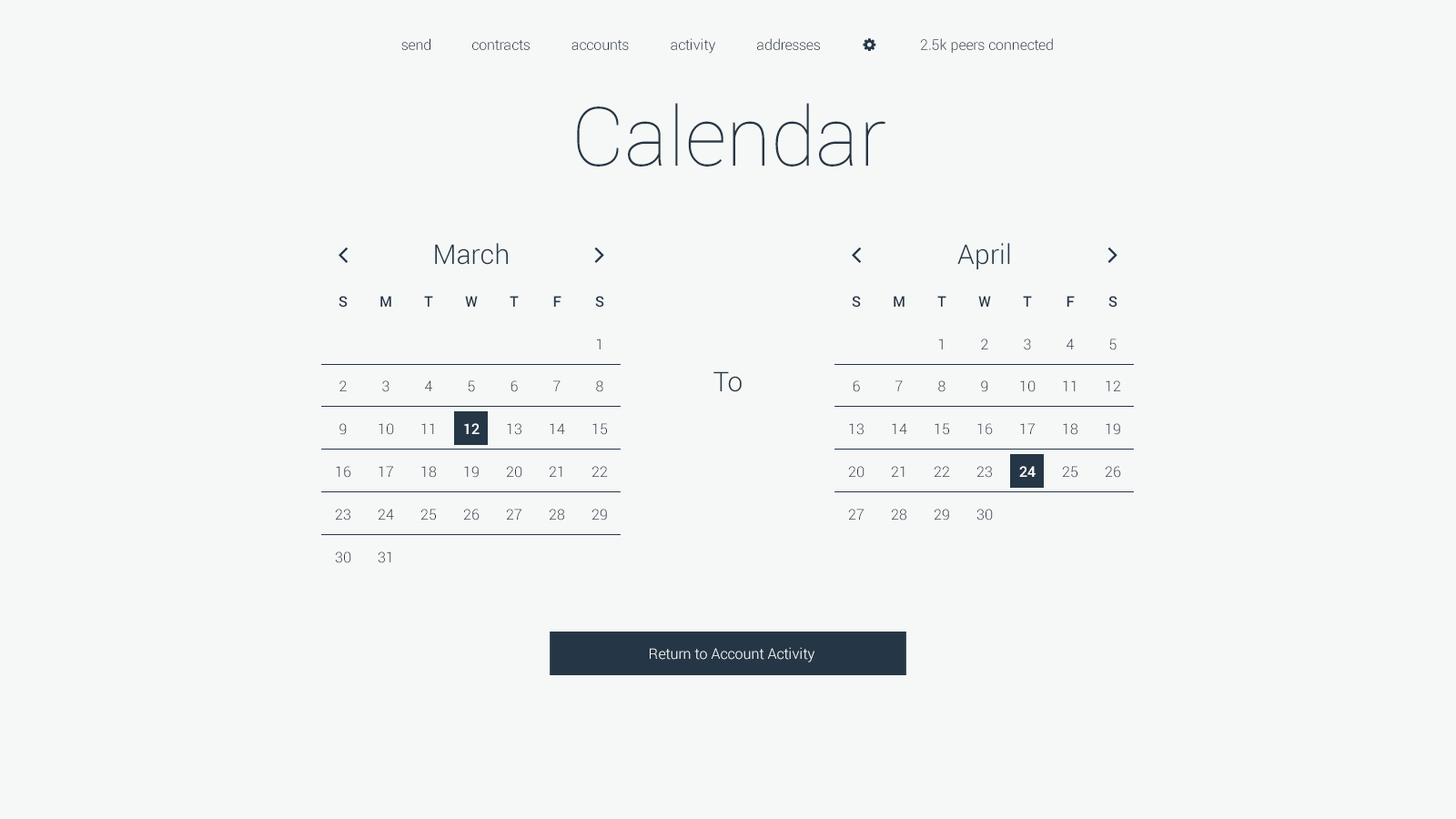
<style>
.page{position:relative;width:1456px;height:819px;background:#f6f7f7}
.page>*{position:absolute;margin:0}
.t1{font:14.6px "Roboto-Light";color:#253746}
.t2{font:81.9px "Roboto-Thin";color:#253746}
.t3{font:27.3px "Roboto-Light";color:#253746}
.t4{font:14.6px "Roboto-Medium";color:#253746}
.t5{font:14.6px "Roboto-Light"}
.t6{font:14.6px "Roboto-Medium";color:#ffffff}
.t7{font:14.6px "Roboto-Light";color:#ffffff}
</style>
<div class="page">
<p class="t1" style="left:401px;top:38px;width:29px;height:12px">send</p>
<p class="t1" style="left:472px;top:40px;width:58px;height:10px">contracts</p>
<p class="t1" style="left:571px;top:40px;width:58px;height:10px">accounts</p>
<p class="t1" style="left:671px;top:38px;width:44px;height:16px">activity</p>
<p class="t1" style="left:757px;top:38px;width:63px;height:12px">addresses</p>
<p class="t1" style="left:920px;top:38px;width:133px;height:15px">2.5k peers connected</p>
<p class="t2" style="left:577px;top:103px;width:308px;height:64px">Calendar</p>
<p class="t3" style="left:435px;top:243px;width:73px;height:22px">March</p>
<p class="t3" style="left:957px;top:243px;width:53px;height:26px">April</p>
<p class="t4" style="left:339px;top:296px;width:9px;height:12px">S</p>
<p class="t4" style="left:380px;top:296px;width:11px;height:11px">M</p>
<p class="t4" style="left:424px;top:296px;width:9px;height:11px">T</p>
<p class="t4" style="left:465px;top:296px;width:13px;height:11px">W</p>
<p class="t4" style="left:510px;top:296px;width:9px;height:11px">T</p>
<p class="t4" style="left:553px;top:296px;width:8px;height:11px">F</p>
<p class="t4" style="left:595px;top:296px;width:9px;height:12px">S</p>
<p class="t4" style="left:852px;top:296px;width:9px;height:12px">S</p>
<p class="t4" style="left:894px;top:296px;width:11px;height:11px">M</p>
<p class="t4" style="left:937px;top:296px;width:9px;height:11px">T</p>
<p class="t4" style="left:978px;top:296px;width:13px;height:11px">W</p>
<p class="t4" style="left:1023px;top:296px;width:9px;height:11px">T</p>
<p class="t4" style="left:1067px;top:296px;width:8px;height:11px">F</p>
<p class="t4" style="left:1108px;top:296px;width:9px;height:12px">S</p>
<p class="t5" style="left:597px;top:339px;width:4px;height:10px">1</p>
<p class="t5" style="left:939px;top:339px;width:4px;height:10px">1</p>
<p class="t5" style="left:981px;top:339px;width:7px;height:10px">2</p>
<p class="t5" style="left:1024px;top:339px;width:7px;height:11px">3</p>
<p class="t1" style="left:1067px;top:339px;width:7px;height:10px">4</p>
<p class="t5" style="left:1109px;top:339px;width:8px;height:11px">5</p>
<p class="t3" style="left:713px;top:371px;width:29px;height:21px">To</p>
<p class="t5" style="left:339px;top:380px;width:8px;height:11px">2</p>
<p class="t5" style="left:382px;top:380px;width:7px;height:12px">3</p>
<p class="t1" style="left:425px;top:380px;width:7px;height:11px">4</p>
<p class="t5" style="left:468px;top:380px;width:7px;height:12px">5</p>
<p class="t5" style="left:511px;top:380px;width:7px;height:12px">6</p>
<p class="t5" style="left:553px;top:380px;width:8px;height:11px">7</p>
<p class="t5" style="left:596px;top:380px;width:7px;height:12px">8</p>
<p class="t5" style="left:853px;top:380px;width:7px;height:12px">6</p>
<p class="t5" style="left:895px;top:380px;width:8px;height:11px">7</p>
<p class="t5" style="left:938px;top:380px;width:7px;height:12px">8</p>
<p class="t5" style="left:981px;top:380px;width:7px;height:12px">9</p>
<p class="t1" style="left:1020px;top:380px;width:16px;height:12px">10</p>
<p class="t5" style="left:1063px;top:380px;width:13px;height:11px">11</p>
<p class="t5" style="left:1106px;top:380px;width:15px;height:11px">12</p>
<p class="t5" style="left:339px;top:423px;width:8px;height:12px">9</p>
<p class="t1" style="left:379px;top:423px;width:15px;height:12px">10</p>
<p class="t5" style="left:421px;top:423px;width:13px;height:11px">11</p>
<p class="t6" style="left:464px;top:423px;width:16px;height:11px">12</p>
<p class="t5" style="left:507px;top:423px;width:14px;height:12px">13</p>
<p class="t1" style="left:550px;top:423px;width:15px;height:11px">14</p>
<p class="t1" style="left:592px;top:423px;width:15px;height:12px">15</p>
<p class="t5" style="left:849px;top:423px;width:15px;height:12px">13</p>
<p class="t1" style="left:892px;top:423px;width:15px;height:11px">14</p>
<p class="t1" style="left:935px;top:423px;width:14px;height:12px">15</p>
<p class="t5" style="left:977px;top:423px;width:16px;height:12px">16</p>
<p class="t1" style="left:1020px;top:423px;width:15px;height:11px">17</p>
<p class="t1" style="left:1063px;top:423px;width:14px;height:12px">18</p>
<p class="t5" style="left:1106px;top:423px;width:14px;height:12px">19</p>
<p class="t5" style="left:336px;top:466px;width:15px;height:12px">16</p>
<p class="t1" style="left:379px;top:466px;width:14px;height:11px">17</p>
<p class="t1" style="left:421px;top:466px;width:15px;height:12px">18</p>
<p class="t5" style="left:464px;top:466px;width:15px;height:12px">19</p>
<p class="t1" style="left:506px;top:466px;width:16px;height:12px">20</p>
<p class="t5" style="left:549px;top:466px;width:13px;height:11px">21</p>
<p class="t5" style="left:591px;top:466px;width:17px;height:11px">22</p>
<p class="t1" style="left:848px;top:466px;width:16px;height:12px">20</p>
<p class="t5" style="left:891px;top:466px;width:14px;height:11px">21</p>
<p class="t5" style="left:934px;top:466px;width:16px;height:11px">22</p>
<p class="t5" style="left:976px;top:466px;width:16px;height:12px">23</p>
<p class="t6" style="left:1019px;top:466px;width:17px;height:11px">24</p>
<p class="t1" style="left:1062px;top:466px;width:15px;height:12px">25</p>
<p class="t5" style="left:1105px;top:466px;width:16px;height:12px">26</p>
<p class="t5" style="left:335px;top:509px;width:15px;height:12px">23</p>
<p class="t5" style="left:378px;top:509px;width:16px;height:11px">24</p>
<p class="t1" style="left:420px;top:509px;width:16px;height:12px">25</p>
<p class="t5" style="left:463px;top:509px;width:17px;height:12px">26</p>
<p class="t1" style="left:506px;top:509px;width:15px;height:11px">27</p>
<p class="t1" style="left:549px;top:509px;width:15px;height:12px">28</p>
<p class="t5" style="left:591px;top:509px;width:16px;height:12px">29</p>
<p class="t1" style="left:848px;top:509px;width:16px;height:11px">27</p>
<p class="t1" style="left:891px;top:509px;width:15px;height:12px">28</p>
<p class="t5" style="left:934px;top:509px;width:15px;height:12px">29</p>
<p class="t1" style="left:976px;top:509px;width:17px;height:12px">30</p>
<p class="t1" style="left:335px;top:551px;width:16px;height:12px">30</p>
<p class="t5" style="left:378px;top:551px;width:13px;height:12px">31</p>
<p class="t7" style="left:650px;top:647px;width:164px;height:15px">Return to Account Activity</p>
</div>
